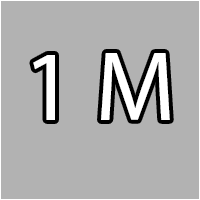
<style>
.page{position:relative;width:200px;height:200px;background:#b2b2b2}
.page>*{position:absolute;margin:0}
.t1{font:100px "MyriadPro-Regular";color:#ffffff}
</style>
<div class="page">
<p class="t1" style="left:33px;top:53px;width:137px;height:67px">1 M</p>
</div>
